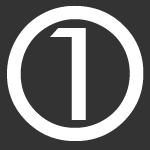
<style>
.page{position:relative;width:150px;height:150px;background:#333333}
.page>*{position:absolute;margin:0}
.t1{font:180px "CenturyGothic";color:#ffffff}
.t2{font:128px "CenturyGothic";color:#ffffff;scale:1.5 1}
</style>
<div class="page">
<p class="t1" style="left:7px;top:5px;width:137px;height:136px">O</p>
<p class="t2" style="left:50px;top:28px;width:36px;height:92px">1</p>
</div>
